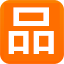
<style>
.page{position:relative;width:64px;height:64px;background:#fe6e00}
.page>*{position:absolute;margin:0}
.t1{font:52.2px "FZLTZHK--GBK1-0";color:#ffffff}
</style>
<div class="page">
<p class="t1" style="left:8px;top:7px;width:46px;height:47px">品</p>
</div>
